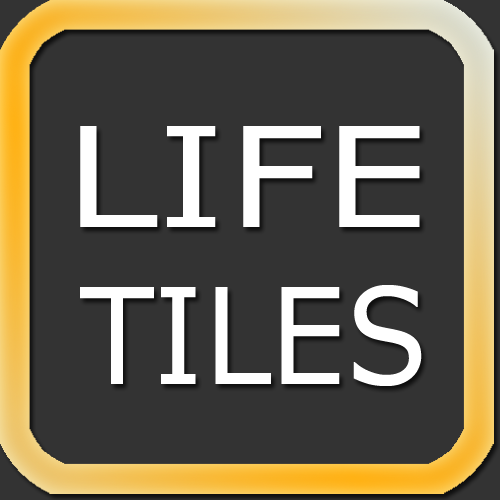
<style>
.page{position:relative;width:500px;height:500px;background:#333333}
.page>*{position:absolute;margin:0}
.t1{font:138.7px "Verdana";color:#ffffff;scale:1.2 1}
.t2{font:132.9px "Verdana";color:#ffffff;scale:0.9 1}
</style>
<div class="page">
<p class="t1" style="left:80px;top:126px;width:340px;height:101px">LIFE</p>
<p class="t2" style="left:80px;top:285px;width:342px;height:101px">TILES</p>
</div>
